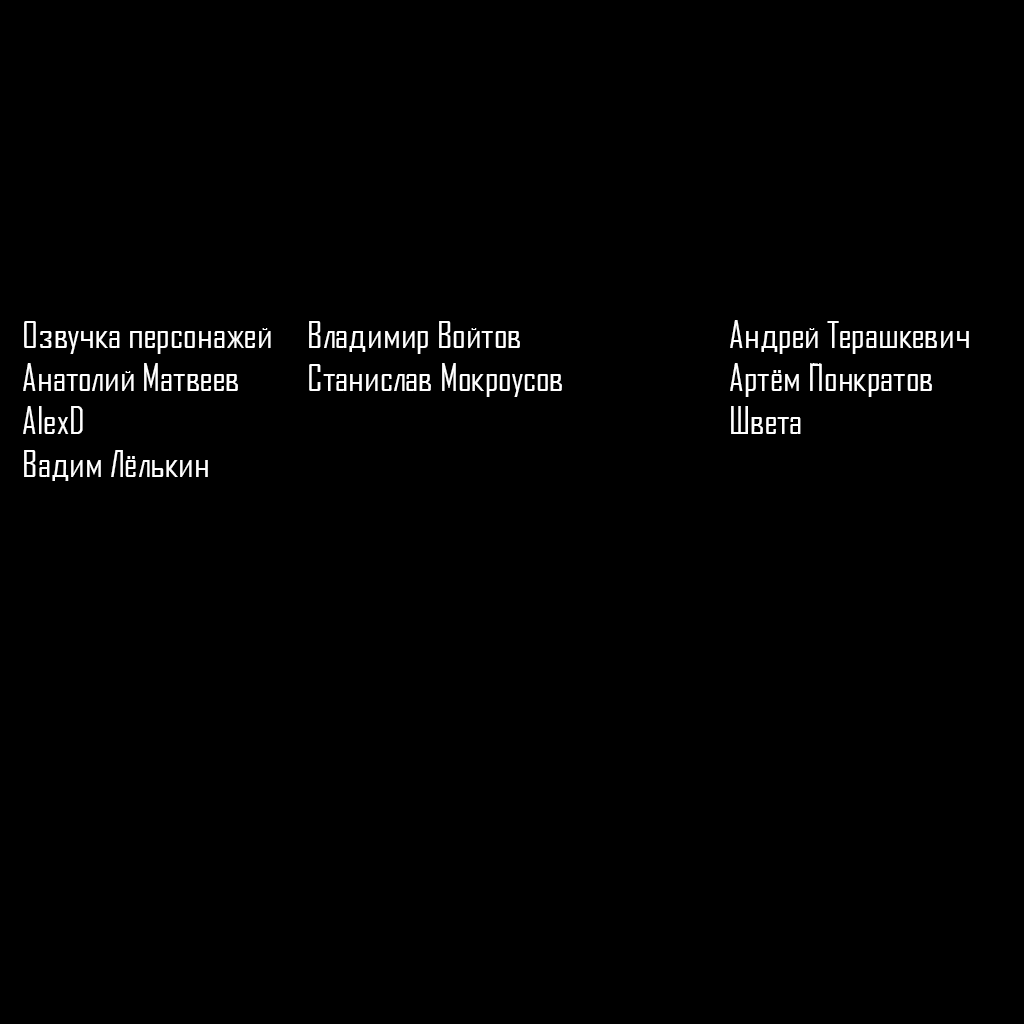
<style>
.page{position:relative;width:1024px;height:1024px;background:#000000}
.page>*{position:absolute;margin:0}
.t1{font:36px "AgencyFBCyrillic";color:#ffffff}
</style>
<div class="page">
<p class="t1" style="left:23px;top:321px;width:248px;height:160px">Озвучка персонажей<br>Анатолий Матвеев<br>AlexD<br>Вадим Лёлькин</p>
<p class="t1" style="left:309px;top:321px;width:253px;height:76px">Владимир Войтов<br>Станислав Мокроусов</p>
<p class="t1" style="left:730px;top:320px;width:239px;height:114px">Андрей Терашкевич<br>Артём Понкратов<br>Швета</p>
</div>
